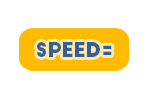
<style>
.page{position:relative;width:150px;height:100px;background:#ffffff}
.page>*{position:absolute;margin:0}
.t1{font:20px "BigJohn";color:#375e97}
</style>
<div class="page">
<p class="t1" style="left:37px;top:42px;width:75px;height:15px">Speed=</p>
</div>
